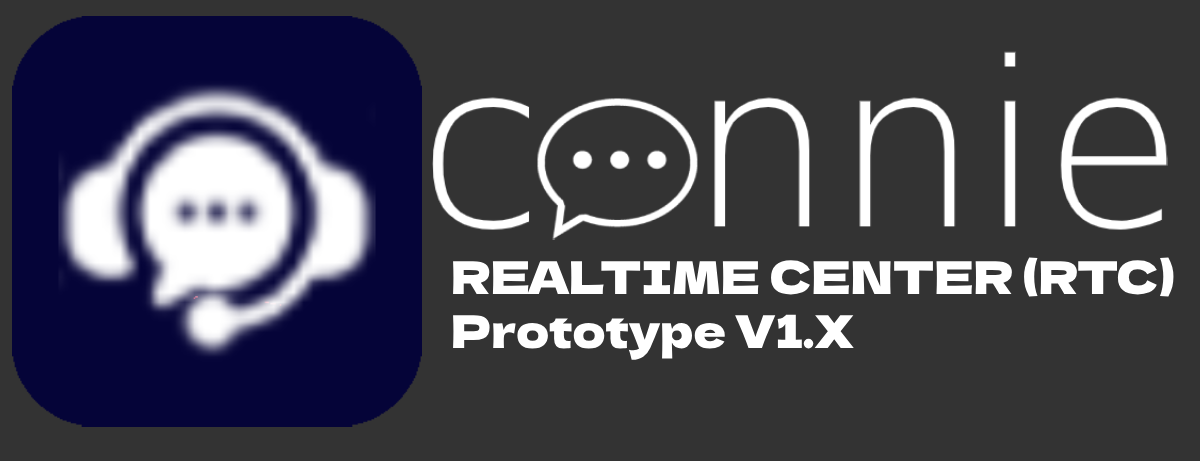
<style>
.page{position:relative;width:1200px;height:461px;background:#333333}
.page>*{position:absolute;margin:0}
.t1{font:45.1px "DelaGothicOne-Regular";color:#ffffff}
</style>
<div class="page">
<p class="t1" style="left:453px;top:257px;width:721px;height:103px">REALTIME CENTER (RTC) <br>Prototype V1.X</p>
</div>
